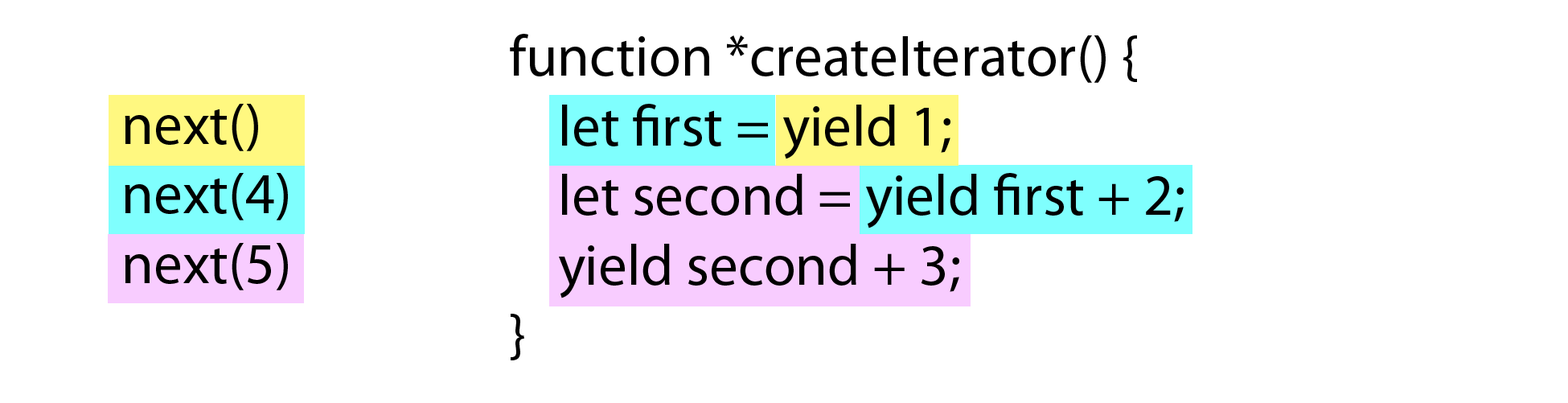
<style>
.page{position:relative;width:1568px;height:403px;background:#ffffff}
.page>*{position:absolute;margin:0}
.t1{font:57.9px "MyriadPro-Regular";color:#000000}
</style>
<div class="page">
<p class="t1" style="left:510px;top:34px;width:674px;height:326px">function *createIterator() {<br>    let first = yield 1;<br>    let second = yield first + 2;<br>    yield second + 3;<br>}</p>
<p class="t1" style="left:125px;top:104px;width:163px;height:186px">next()<br>next(4)<br>next(5)</p>
</div>
